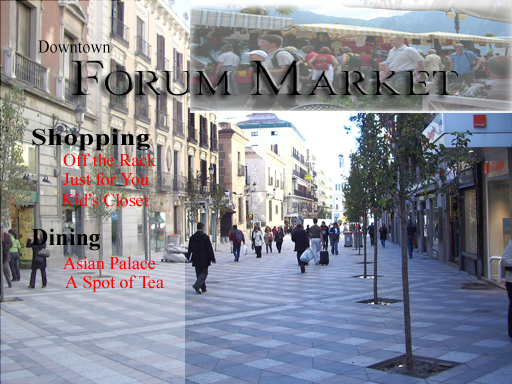
<style>
.page{position:relative;width:512px;height:384px}
.page>*{position:absolute;margin:0}
.t1{font:18px "TimesNewRomanPSMT";color:#000000;scale:0.88 1}
.t2{font:51.8px "TimesNewRomanPSMT";font-variant:small-caps;scale:1.22 1}
.t3{font:24px "TimesNewRomanPS-BoldMT";color:#000000;scale:1.19 1}
.t4{font:18px "TimesNewRomanPSMT";color:#ff0000}
.t5{font:24px "TimesNewRomanPS-BoldMT";color:#000000}
</style>
<div class="page">
<p class="t1" style="left:38px;top:40px;width:73px;height:13px">Downtown</p>
<p class="t2" style="left:71px;top:60px;width:387px;height:36px">Forum Market</p>
<p class="t3" style="left:32px;top:128px;width:118px;height:23px">Shopping</p>
<p class="t4" style="left:63px;top:153px;width:93px;height:14px">Off the Rack</p>
<p class="t4" style="left:63px;top:172px;width:86px;height:14px">Just for You</p>
<p class="t4" style="left:61px;top:193px;width:88px;height:14px">Kid’s Closet</p>
<p class="t5" style="left:31px;top:228px;width:69px;height:23px">Dining</p>
<p class="t4" style="left:63px;top:256px;width:92px;height:14px">Asian Palace</p>
<p class="t4" style="left:65px;top:275px;width:99px;height:17px">A Spot of Tea</p>
</div>
